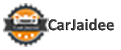
<style>
.page{position:relative;width:121px;height:50px;background:#ffffff}
.page>*{position:absolute;margin:0}
.t1{font:16.7px "Calibri-Bold";color:#3a3a3a}
</style>
<div class="page">
<p class="t1" style="left:48px;top:18px;width:67px;height:13px">CarJaidee</p>
</div>
